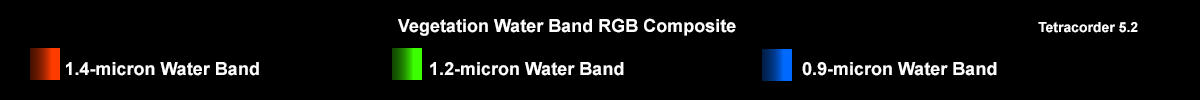
<style>
.page{position:relative;width:1200px;height:100px;background:#000000}
.page>*{position:absolute;margin:0}
.t1{font:18px "Arial-BoldMT";color:#fffefe}
.t2{font:14px "Arial-BoldMT";color:#fffefe}
</style>
<div class="page">
<p class="t1" style="left:398px;top:18px;width:338px;height:18px">Vegetation Water Band RGB Composite</p>
<p class="t2" style="left:1038px;top:22px;width:100px;height:11px">Tetracorder 5.2</p>
<p class="t1" style="left:65px;top:62px;width:194px;height:14px">1.4-micron Water Band</p>
<p class="t1" style="left:430px;top:62px;width:194px;height:14px">1.2-micron Water Band</p>
<p class="t1" style="left:802px;top:62px;width:195px;height:14px">0.9-micron Water Band</p>
</div>
